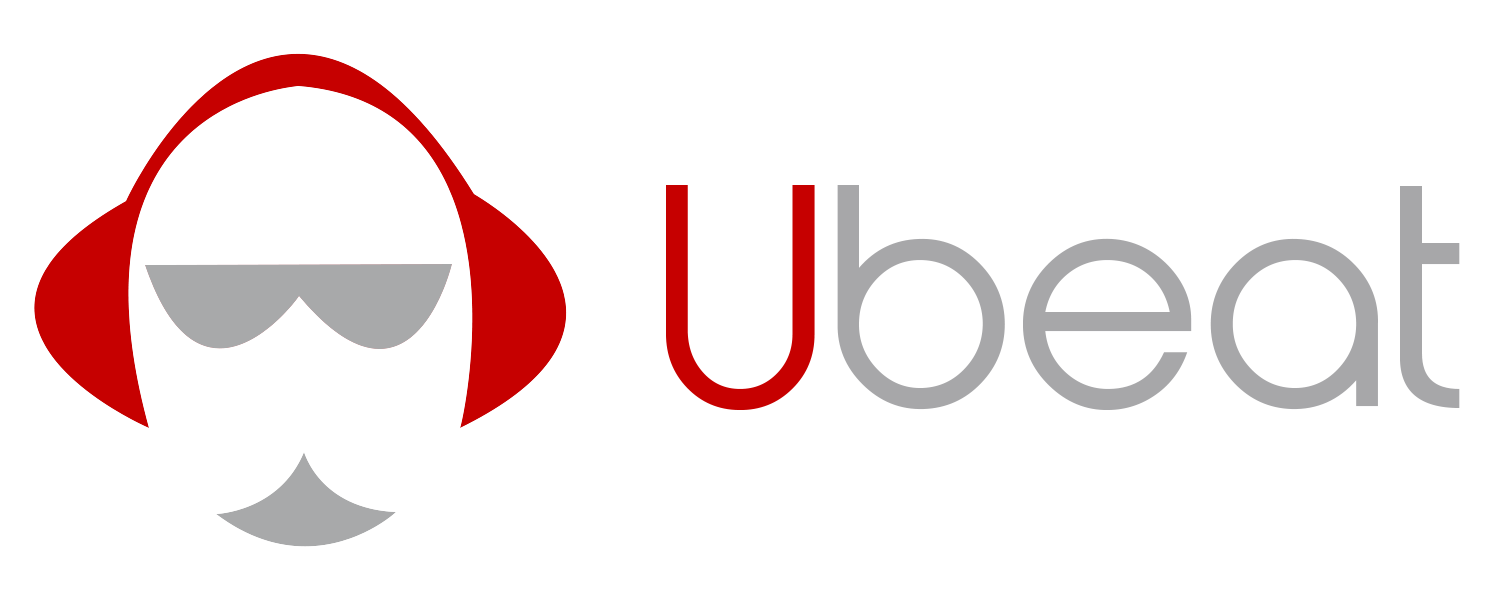
<style>
.page{position:relative;width:1500px;height:600px;background:#ffffff}
.page>*{position:absolute;margin:0}
.t1{font:285px "AbeatbyKai";color:#a7a7a9}
.t2{font:285px "AbeatbyKai";color:#c60000}
</style>
<div class="page">
<p class="t1" style="left:666px;top:185px;width:794px;height:225px"><span class="t2">U</span>beat</p>
</div>
